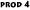
<style>
.page{position:relative;width:30px;height:10px;background:#ffffff}
.page>*{position:absolute;margin:0}
.t1{font:8.5px "LithosPro-Black";color:#000000;scale:0.87 1}
</style>
<div class="page">
<p class="t1" style="left:0px;top:0px;width:30px;height:8px">prod 4</p>
</div>
